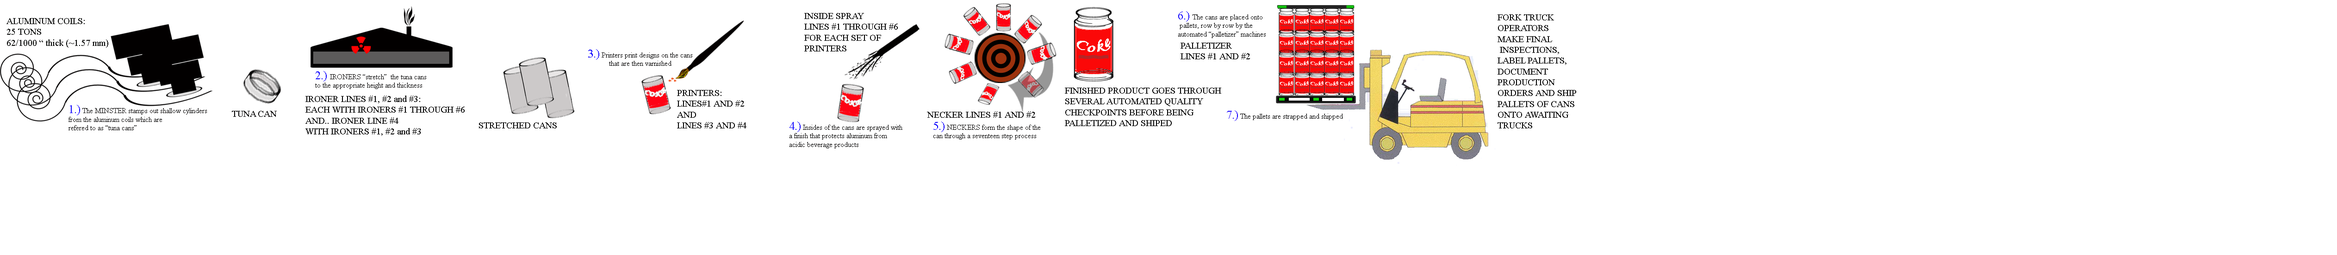
<style>
.page{position:relative;width:2337px;height:255px;background:#ffffff}
.page>*{position:absolute;margin:0}
.t1{font:9px "TimesNewRomanPSMT";color:#010101}
.t2{font:7.1px "TimesNewRomanPSMT";color:#000000}
.t3{font:11.6px "TimesNewRomanPSMT";color:#0e02ff}
.t4{font:9px "TimesNewRomanPSMT";color:#000000}
.t5{font:9px "TimesNewRomanPSMT";color:#000100}
.t6{font:7.1px "TimesNewRomanPSMT";color:#010000}
.t7{font:9px "TimesNewRomanPSMT";color:#020000}
.t8{font:11.6px "TimesNewRomanPSMT";color:#1a02ff}
</style>
<div class="page">
<p class="t1" style="left:804px;top:13px;width:94px;height:38px">INSIDE SPRAY <br>LINES #1 THROUGH #6<br>FOR EACH SET OF <br>PRINTERS</p>
<p class="t2" style="left:1178px;top:11px;width:88px;height:27px"><span class="t3">6.) </span>The cans are placed onto<br> pallets, row by row by the<br>automated “palletizer” machines</p>
<p class="t4" style="left:1498px;top:14px;width:78px;height:114px">FORK TRUCK <br>OPERATORS<br>MAKE FINAL<br> INSPECTIONS,<br>LABEL PALLETS,<br>DOCUMENT<br>PRODUCTION<br>ORDERS AND SHIP<br>PALLETS OF CANS<br>ONTO AWAITING<br>TRUCKS</p>
<p class="t5" style="left:6px;top:18px;width:102px;height:30px">ALUMINUM COILS:<br>25 TONS<br>62/1000 “ thick (~1.57 mm)</p>
<p class="t6" style="left:588px;top:49px;width:104px;height:17px;text-align:center"><span class="t3">3.)</span> Printers print designs on the cans <br>that are then varnished</p>
<p class="t4" style="left:1181px;top:43px;width:69px;height:16px">PALLETIZER <br>LINES #1 AND #2</p>
<p class="t6" style="left:315px;top:71px;width:111px;height:18px"><span class="t3">2.) </span>IRONERS “stretch”  the tuna cans<br>to the appropriate height and thickness</p>
<p class="t1" style="left:677px;top:90px;width:70px;height:38px">PRINTERS:<br>LINES#1 AND #2<br>AND<br>LINES #3 AND #4</p>
<p class="t4" style="left:1065px;top:87px;width:156px;height:39px">FINISHED PRODUCT GOES THROUGH <br>SEVERAL AUTOMATED QUALITY<br>CHECKPOINTS BEFORE BEING <br>PALLETIZED AND SHIPED</p>
<p class="t1" style="left:305px;top:95px;width:160px;height:41px">IRONER LINES #1, #2 and #3:<br>EACH WITH IRONERS #1 THROUGH #6<br>AND.. IRONER LINE #4<br>WITH IRONERS #1, #2 and #3</p>
<p class="t6" style="left:69px;top:105px;width:138px;height:25px"><span class="t3">1.)</span> The MINSTER stamps out shallow cylinders <br>from the aluminum coils which are <br>refered to as “tuna cans”</p>
<p class="t7" style="left:232px;top:111px;width:45px;height:6px">TUNA CAN</p>
<p class="t1" style="left:927px;top:111px;width:108px;height:7px">NECKER LINES #1 AND #2</p>
<p class="t2" style="left:1227px;top:110px;width:116px;height:11px"><span class="t8">7.)</span> The pallets are strapped and shipped</p>
<p class="t1" style="left:479px;top:122px;width:78px;height:6px">STRETCHED CANS</p>
<p class="t6" style="left:790px;top:121px;width:113px;height:27px"><span class="t3">4.)</span> Insides of the cans are sprayed with <br>a finish that protects aluminum from <br>acidic beverage products</p>
<p class="t6" style="left:934px;top:121px;width:107px;height:18px"><span class="t3">5.)</span> NECKERS form the shape of the<br>can through a seventeen step process</p>
</div>
